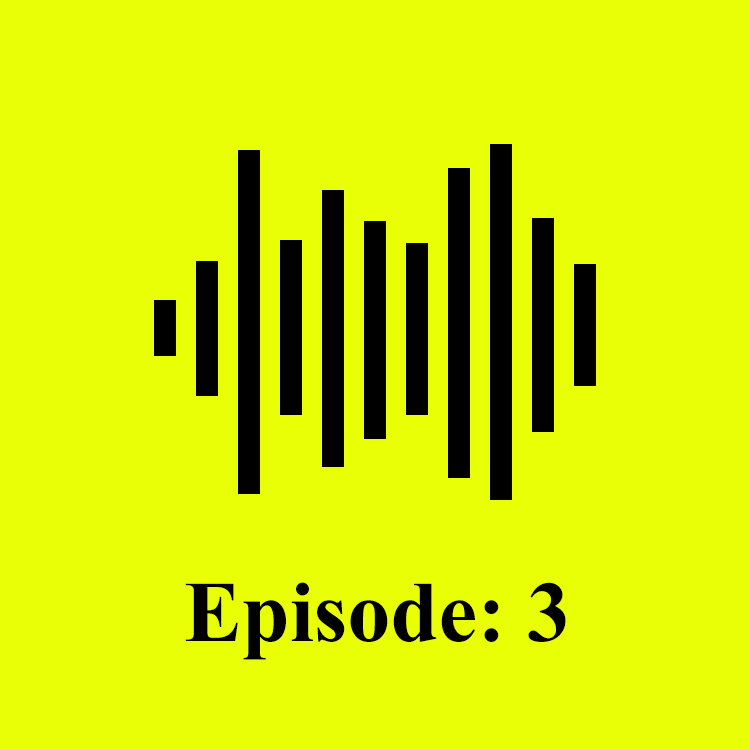
<style>
.page{position:relative;width:750px;height:750px;background:#e9ff06}
.page>*{position:absolute;margin:0}
.t1{font:86.4px "TimesNewRomanPS-BoldMT";color:#000000}
</style>
<div class="page">
<p class="t1" style="left:185px;top:582px;width:381px;height:78px">Episode: 3</p>
</div>
